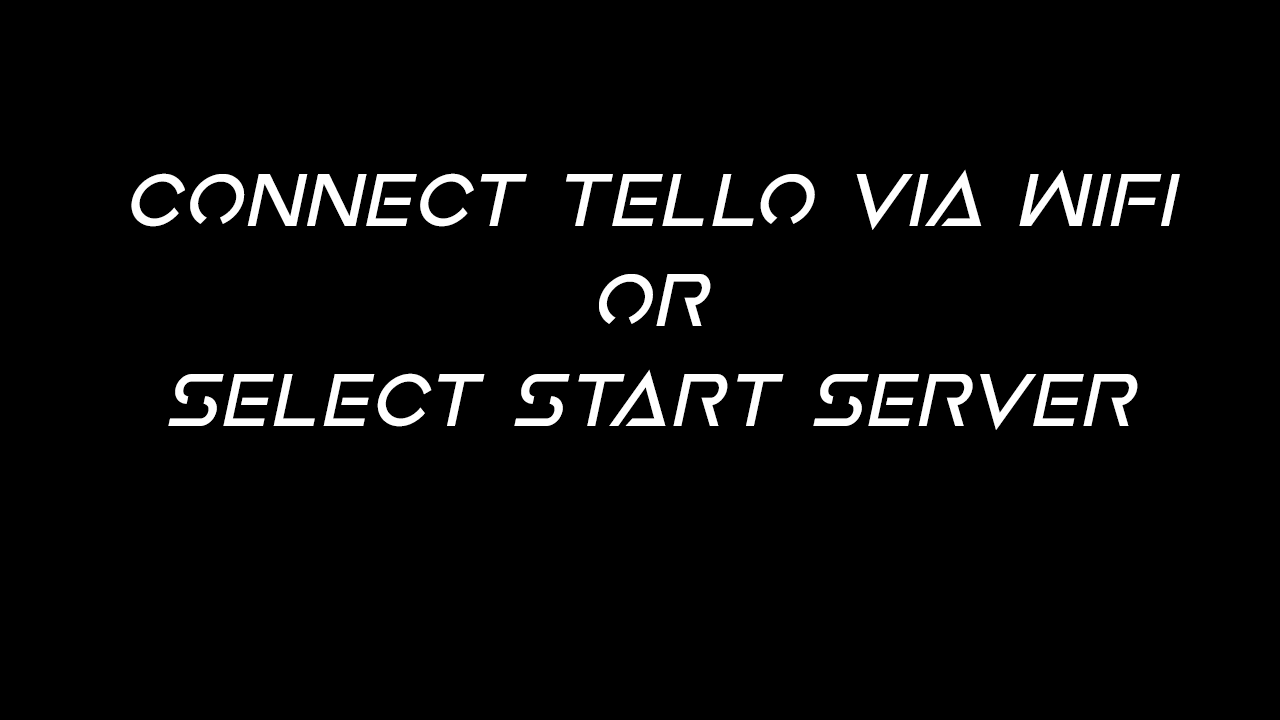
<style>
.page{position:relative;width:1280px;height:720px;background:#000000}
.page>*{position:absolute;margin:0}
.t1{font:83.3px "EarthOrbiterBoldItalic";color:#ffffff}
</style>
<div class="page">
<p class="t1" style="left:131px;top:169px;width:1049px;height:261px;text-align:center">Connect Tello Via Wifi<br>or<br>Select Start Server</p>
</div>
